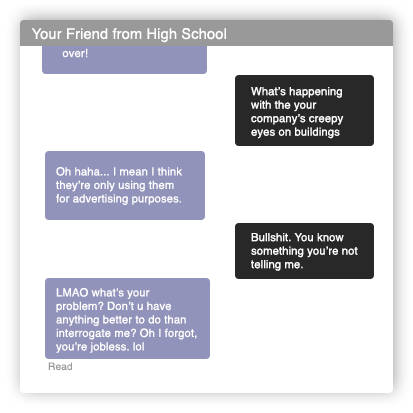
<style>
.page{position:relative;width:413px;height:413px;background:#ffffff}
.page>*{position:absolute;margin:0}
.t1{font:14.6px "Helvetica";letter-spacing:0.01em;color:#ffffff}
.t2{font:11.2px "Helvetica";letter-spacing:0.01em;color:#ffffff}
.t3{font:10.1px "Helvetica";letter-spacing:0.01em;color:#999999}
</style>
<div class="page">
<p class="t1" style="left:31px;top:28px;width:195px;height:15px">Your Friend from High School</p>
<p class="t2" style="left:251px;top:87px;width:93px;height:52px">What’s happening<br>with the your <br>company’s creepy <br>eyes on buildings</p>
<p class="t2" style="left:56px;top:167px;width:126px;height:38px">Oh haha... I mean I think<br>they’re only using them<br>for advertising purposes.</p>
<p class="t2" style="left:251px;top:233px;width:107px;height:38px">Bullshit. You know<br>something you’re not<br>telling me.</p>
<p class="t2" style="left:56px;top:288px;width:141px;height:65px">LMAO what’s your <br>problem? Don’t u have<br>anything better to do than<br>interrogate me? Oh I forgot, <br>you’re jobless. lol</p>
<p class="t3" style="left:48px;top:362px;width:24px;height:9px">Read</p>
</div>
